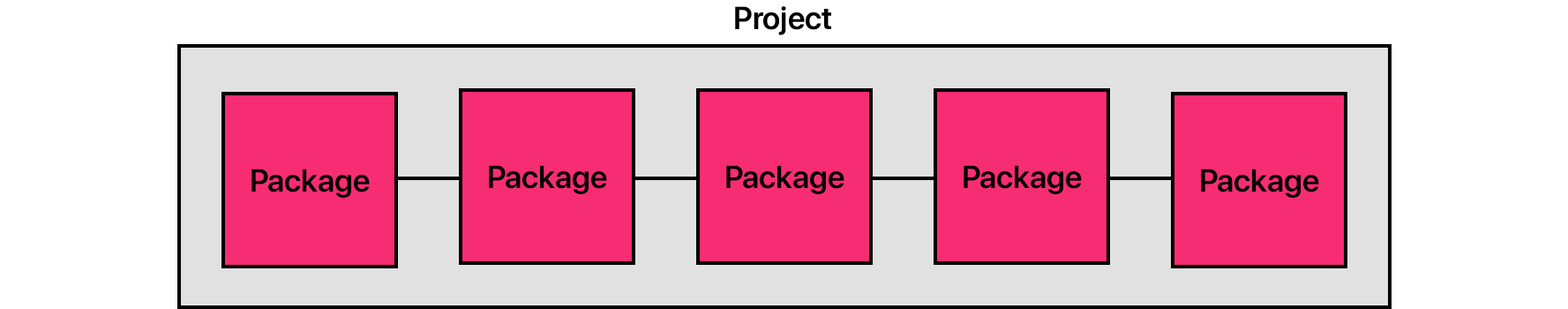
<style>
.page{position:relative;width:1568px;height:309px;background:#ffffff}
.page>*{position:absolute;margin:0}
.t1{font:31.8px "SFProDisplay-Semibold";color:#000000}
</style>
<div class="page">
<p class="t1" style="left:735px;top:6px;width:96px;height:29px">Project</p>
<p class="t1" style="left:251px;top:169px;width:119px;height:29px">Package</p>
<p class="t1" style="left:489px;top:165px;width:118px;height:29px">Package</p>
<p class="t1" style="left:726px;top:165px;width:118px;height:29px">Package</p>
<p class="t1" style="left:964px;top:165px;width:118px;height:29px">Package</p>
<p class="t1" style="left:1201px;top:169px;width:118px;height:29px">Package</p>
</div>
